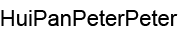
<style>
.page{position:relative;width:181px;height:37px;background:#ffffff}
.page>*{position:absolute;margin:0}
.t1{font:22px "ArialMT";color:#000000}
</style>
<div class="page">
<p class="t1" style="left:1px;top:10px;width:177px;height:16px">HuiPanPeterPeter</p>
</div>
